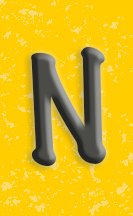
<style>
.page{position:relative;width:133px;height:216px}
.page>*{position:absolute;margin:0}
.t1{font:139.7px "MarkerFelt-Thin"}
</style>
<div class="page">
<p class="t1" style="left:31px;top:47px;width:76px;height:119px">N</p>
</div>
